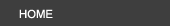
<style>
.page{position:relative;width:170px;height:26px;background:#3e3e3e}
.page>*{position:absolute;margin:0}
.t1{font:18px "Kartika";color:#ffffff}
</style>
<div class="page">
<p class="t1" style="left:19px;top:9px;width:34px;height:10px">HOME</p>
</div>
